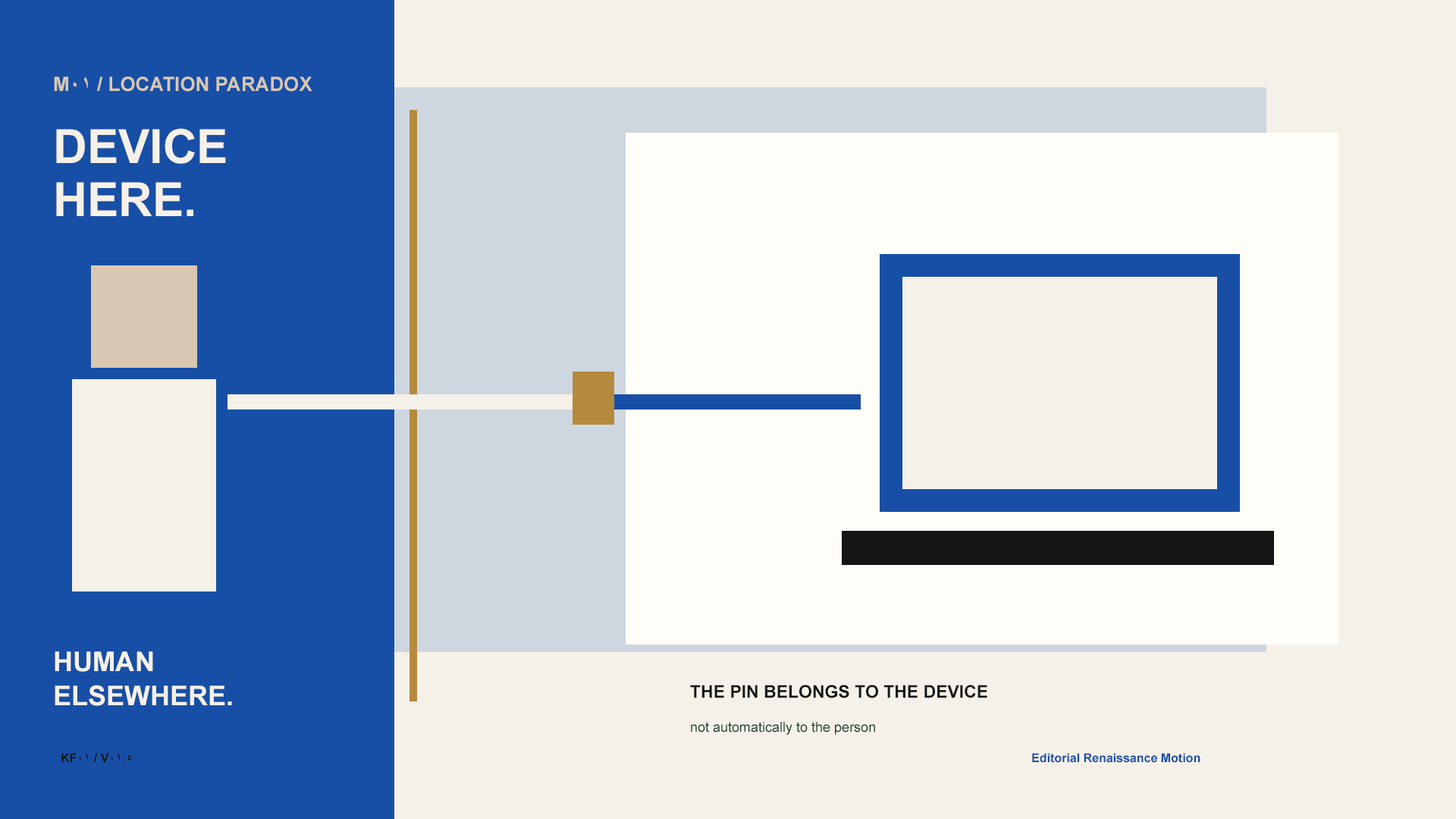
<style>
.page{position:relative;width:1456px;height:819px;background:#f6f1e8}
.page>*{position:absolute;margin:0}
.t1{font:19.7px "Arial-BoldMT";color:#d9c8b1}
.t2{font:47px "Arial-BoldMT";color:#f6f1e8}
.t3{font:27.3px "Arial-BoldMT";color:#f6f1e8}
.t4{font:17.4px "Arial-BoldMT";color:#151515}
.t5{font:13.6px "ArialMT";color:#173c32}
.t6{font:12.1px "Arial-BoldMT";color:#151515}
.t7{font:12.1px "Arial-BoldMT";color:#174fa6}
</style>
<div class="page">
<p class="t1" style="left:54px;top:77px;width:258px;height:15px">M01 / LOCATION PARADOX</p>
<p class="t2" style="left:56px;top:128px;width:170px;height:36px">DEVICE</p>
<p class="t2" style="left:56px;top:182px;width:137px;height:34px">HERE.</p>
<p class="t3" style="left:55px;top:651px;width:98px;height:21px">HUMAN</p>
<p class="t3" style="left:55px;top:685px;width:177px;height:21px">ELSEWHERE.</p>
<p class="t4" style="left:690px;top:685px;width:297px;height:13px">THE PIN BELONGS TO THE DEVICE</p>
<p class="t5" style="left:691px;top:722px;width:184px;height:13px">not automatically to the person</p>
<p class="t6" style="left:61px;top:753px;width:70px;height:9px">KF01 / V01.4</p>
<p class="t7" style="left:1032px;top:753px;width:168px;height:10px">Editorial Renaissance Motion</p>
</div>
